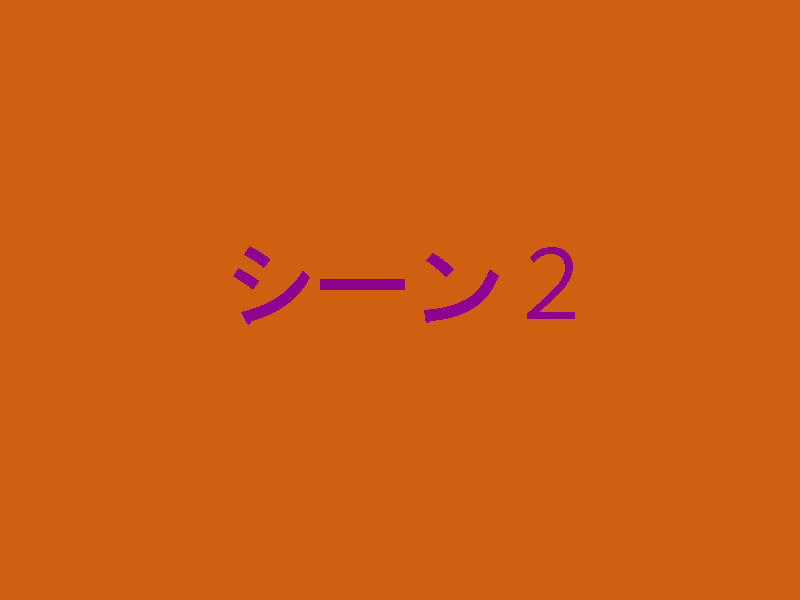
<style>
.page{position:relative;width:800px;height:600px;background:#cf600f}
.page>*{position:absolute;margin:0}
.t1{font:94px "HGGothicE";color:#8c0491}
.t2{font:94px "KozGoPr6N-Regular";color:#8c0491}
</style>
<div class="page">
<p class="t1" style="left:233px;top:246px;width:342px;height:79px">シーン<span class="t2">２</span></p>
</div>
